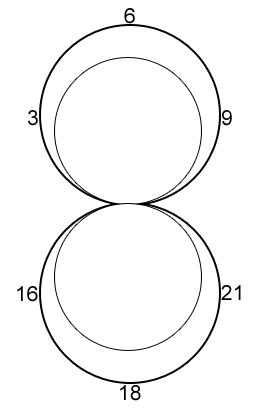
<style>
.page{position:relative;width:254px;height:415px;background:#ffffff}
.page>*{position:absolute;margin:0}
.t1{font:21px "ArialMT";color:#000000}
</style>
<div class="page">
<p class="t1" style="left:124px;top:8px;width:11px;height:16px">6</p>
<p class="t1" style="left:28px;top:110px;width:10px;height:16px">3</p>
<p class="t1" style="left:222px;top:110px;width:10px;height:16px">9</p>
<p class="t1" style="left:17px;top:286px;width:21px;height:16px">16</p>
<p class="t1" style="left:221px;top:285px;width:20px;height:15px">21</p>
<p class="t1" style="left:120px;top:385px;width:21px;height:16px">18</p>
</div>
